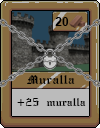
<style>
.page{position:relative;width:100px;height:128px}
.page>*{position:absolute;margin:0}
.t1{font:12px "Arial-BoldMT";color:#000000}
.t2{font:12px "SWGothe";color:#000000}
.t3{font:10px "SWGothe";color:#000000}
</style>
<div class="page">
<p class="t1" style="left:55px;top:17px;width:14px;height:9px">20</p>
<p class="t2" style="left:27px;top:75px;width:48px;height:9px">Muralla</p>
<p class="t3" style="left:17px;top:98px;width:69px;height:8px">+25 muralla</p>
</div>
